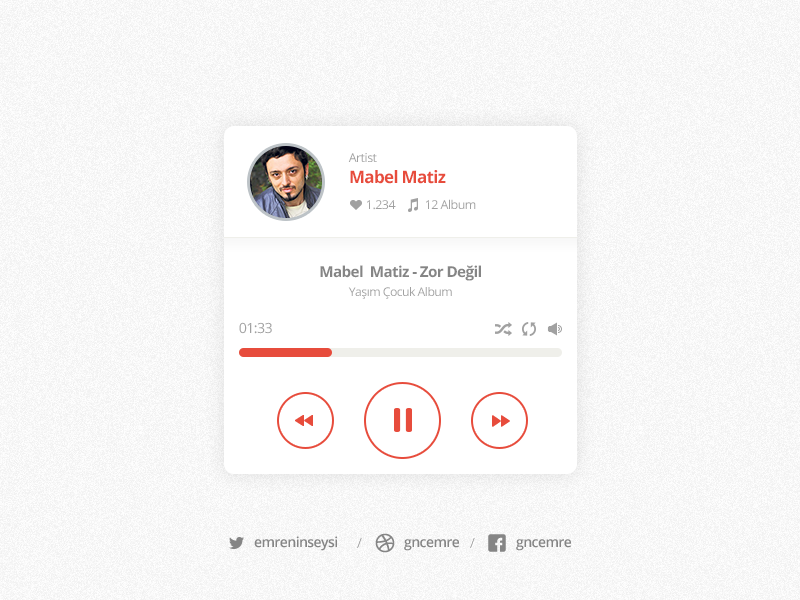
<style>
.page{position:relative;width:800px;height:600px;background:#ffffff}
.page>*{position:absolute;margin:0}
.t1{font:12.2px "OpenSans";letter-spacing:-0.04em;color:#a1a1a1}
.t2{font:17px "OpenSans-Bold";letter-spacing:-0.04em;color:#e74c3c}
.t3{font:15px "OpenSans-Bold";letter-spacing:-0.04em;color:#858585}
.t4{font:12px "OpenSans";letter-spacing:-0.04em;color:#a1a1a1}
.t5{font:14px "OpenSans";letter-spacing:-0.04em;color:#a1a1a1}
</style>
<div class="page">
<p class="t1" style="left:348px;top:153px;width:29px;height:9px">Artist</p>
<p class="t2" style="left:350px;top:170px;width:96px;height:14px">Mabel Matiz</p>
<p class="t1" style="left:367px;top:200px;width:29px;height:10px">1.234</p>
<p class="t1" style="left:426px;top:199px;width:50px;height:10px">12 Album</p>
<p class="t3" style="left:320px;top:265px;width:161px;height:16px">Mabel  Matiz - Zor Değil</p>
<p class="t4" style="left:348px;top:287px;width:104px;height:12px">Yaşım Çocuk Album</p>
<p class="t5" style="left:239px;top:322px;width:33px;height:12px">01:33</p>
</div>
